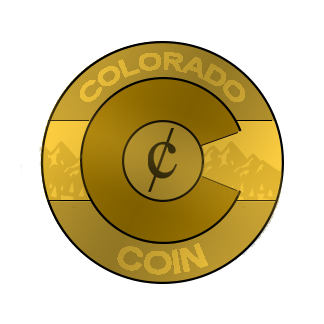
<style>
.page{position:relative;width:324px;height:324px;background:#ffffff}
.page>*{position:absolute;margin:0}
.t1{font:24px "Arial-BoldMT";letter-spacing:-0.025em;color:#c9a332}
.t2{font:32px "Arial-BoldMT";letter-spacing:-0.025em;color:#cea833}
</style>
<div class="page">
<p class="t1" style="left:80px;top:52px;width:165px;height:50px;text-align:center">COLORADO</p>
<p class="t2" style="left:117px;top:243px;width:91px;height:32px">COIN</p>
</div>
